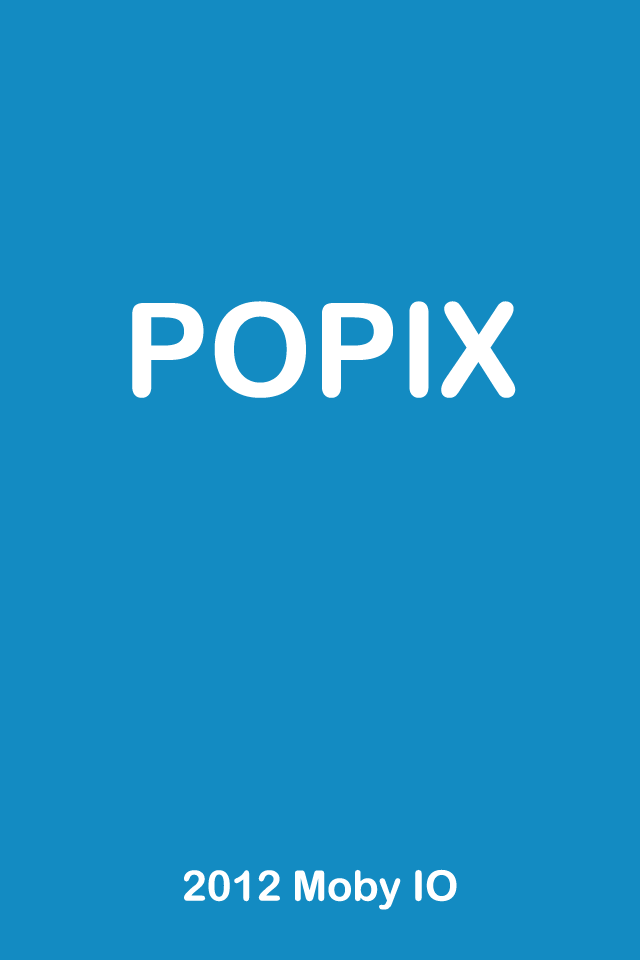
<style>
.page{position:relative;width:640px;height:960px;background:#138bc2}
.page>*{position:absolute;margin:0}
.t1{font:130px "ArialRoundedMTBold";color:#ffffff}
.t2{font:42px "ArialRoundedMTBold";color:#ffffff}
</style>
<div class="page">
<p class="t1" style="left:132px;top:301px;width:384px;height:97px">POPIX</p>
<p class="t2" style="left:184px;top:869px;width:273px;height:41px">2012 Moby IO</p>
</div>
